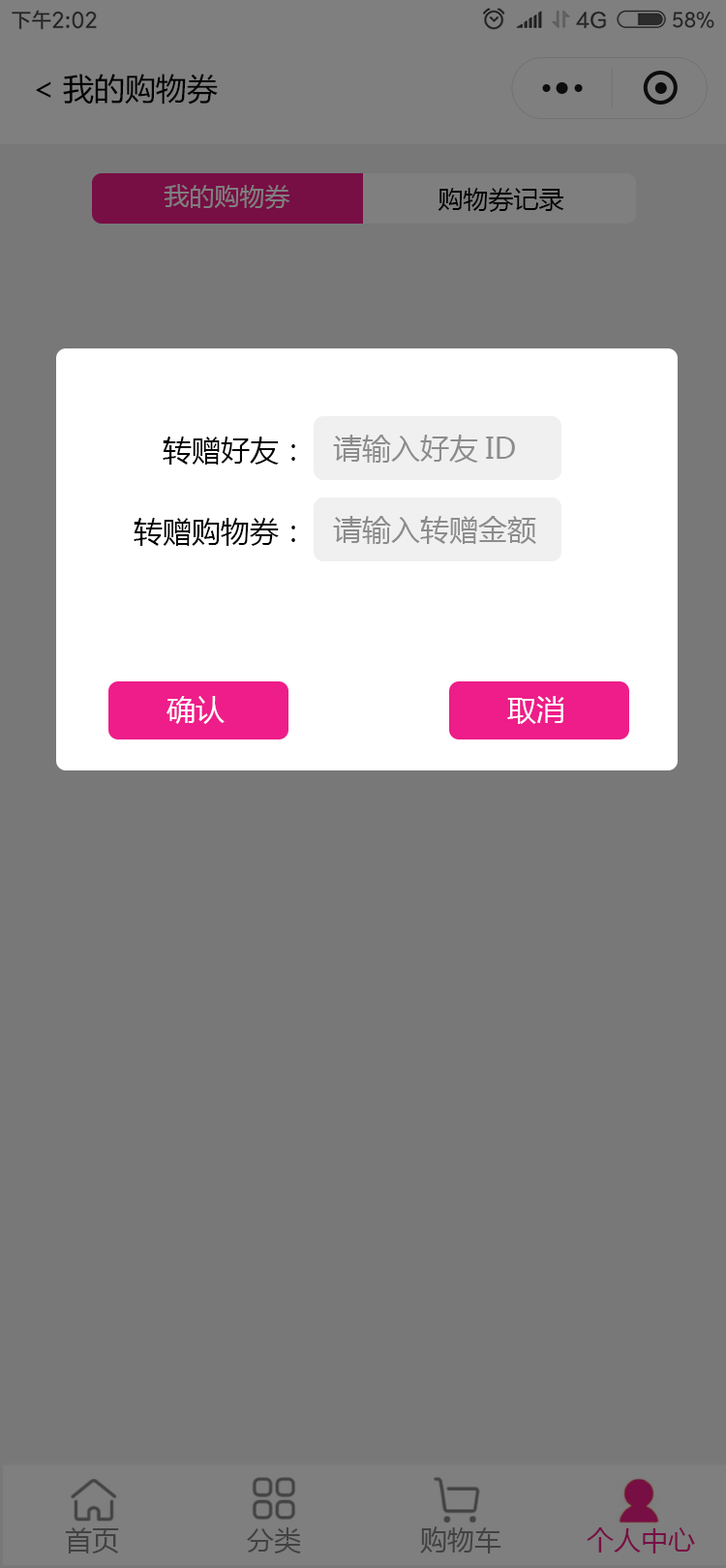
<style>
.page{position:relative;width:726px;height:1568px;background:#787878}
.page>*{position:absolute;margin:0}
.t1{font:31px "MicrosoftYaHei";color:#000000}
.t2{font:25.2px "MicrosoftYaHei";color:#7f7f7f}
.t3{font:25.2px "MicrosoftYaHei";color:#000000}
.t4{font:29px "MicrosoftYaHei";color:#000000}
.t5{font:29px "MicrosoftYaHei";color:#8c8c8c}
.t6{font:29px "MicrosoftYaHei";color:#ffffff}
</style>
<div class="page">
<p class="t1" style="left:36px;top:74px;width:182px;height:31px">&lt;我的购物券</p>
<p class="t2" style="left:164px;top:184px;width:126px;height:25px">我的购物券</p>
<p class="t3" style="left:437px;top:188px;width:127px;height:24px">购物券记录</p>
<p class="t4" style="left:163px;top:437px;width:132px;height:28px">转赠好友：</p>
<p class="t5" style="left:333px;top:435px;width:182px;height:28px">请输入好友ID</p>
<p class="t4" style="left:134px;top:518px;width:161px;height:28px">转赠购物券：</p>
<p class="t5" style="left:333px;top:516px;width:203px;height:28px">请输入转赠金额</p>
<p class="t6" style="left:166px;top:696px;width:59px;height:28px">确认</p>
<p class="t6" style="left:507px;top:696px;width:57px;height:28px">取消</p>
</div>
